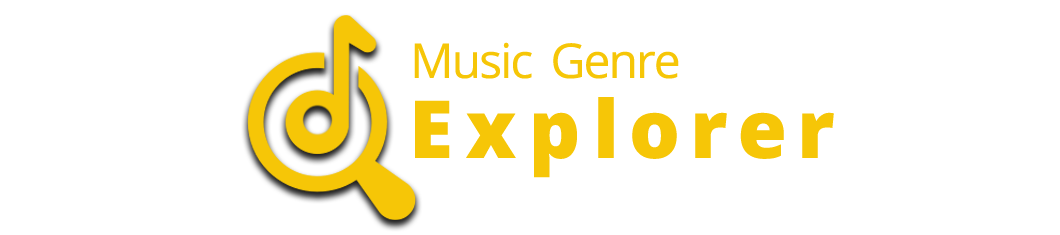
<style>
.page{position:relative;width:1060px;height:235px;background:#ffffff}
.page>*{position:absolute;margin:0}
.t1{font:48px "OpenSansHebrew-Regular";letter-spacing:-0.04em;color:#f6c607}
.t2{font:48px "OpenSansHebrew-ExtraBold";letter-spacing:-0.04em;color:#f6c607}
.t3{font:80px "OpenSansHebrew-ExtraBold";letter-spacing:0.125em;color:#f6c607}
.t4{font:80px "OpenSansHebrew-ExtraBold";letter-spacing:0.16em;color:#f6c607}
</style>
<div class="page">
<p class="t1" style="left:414px;top:42px;width:118px;height:37px"><span class="t2">     </span>Music</p>
<p class="t1" style="left:553px;top:43px;width:126px;height:36px">Genre</p>
<p class="t3" style="left:415px;top:97px;width:419px;height:81px"><span class="t2">  </span><span class="t4">Exp</span>lorer</p>
</div>
